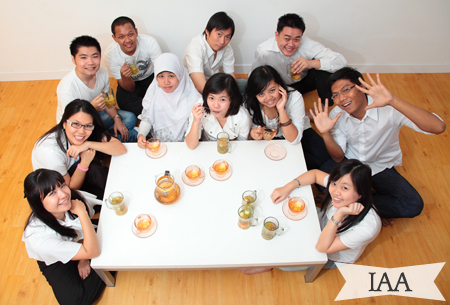
<style>
.page{position:relative;width:450px;height:305px}
.page>*{position:absolute;margin:0}
.t1{font:27.8px "Quattrocento";letter-spacing:-0.075em;color:#383838;font-weight:bold}
</style>
<div class="page">
<p class="t1" style="left:368px;top:272px;width:45px;height:20px">IAA</p>
</div>
